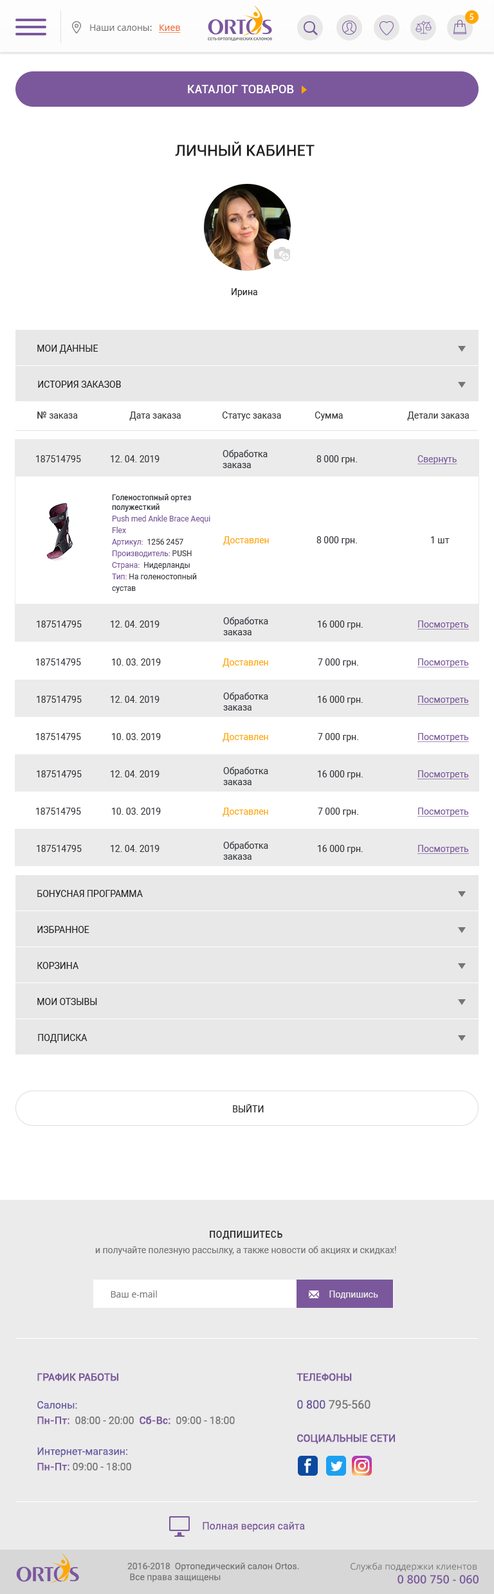
<style>
.page{position:relative;width:494px;height:1594px;background:#ffffff}
.page>*{position:absolute;margin:0}
.t1{font:9px "MyriadPro-Regular";letter-spacing:0.1em;color:#ffffff;text-transform:uppercase}
.t2{font:9px "OpenSans";color:#757575}
.t3{font:9px "OpenSans";color:#f26022;text-decoration:underline}
.t4{font:11.6px "Roboto-Medium";letter-spacing:0.01em;color:#ffffff;text-transform:uppercase}
.t5{font:15.4px "Roboto-Medium";color:#212121;text-transform:uppercase}
.t6{font:9px "Roboto-Regular";color:#212121}
.t7{font:9px "Roboto-Regular";color:#212121;text-transform:uppercase}
.t8{font:9px "Roboto-Regular";color:#34373d}
.t9{font:9px "Roboto-Medium";color:#34373d}
.t10{font:9px "Roboto-Regular";color:#7b589c;text-decoration:underline}
.t11{font:7.7px/11.6px "Roboto-Regular";color:#7b589c}
.t12{font:7.7px "Roboto-Medium";color:#34373d}
.t13{font:7.7px/11.6px "Roboto-Regular";color:#34373d}
.t14{font:9px "Roboto-Regular";color:#ffa700}
.t15{font:9px/15.4px "Roboto-Regular";color:#757575}
.t16{font:9px "Roboto-Medium";letter-spacing:0.05em;color:#212121;text-transform:uppercase}
.t17{font:9px "Roboto-Regular";color:#ebebeb}
.t18{font:10.3px/15.4px "Roboto-Regular";color:#6758a2}
.t19{font:10.3px "Roboto-Medium";color:#7b589c;text-transform:uppercase}
.t20{font:10.3px/15.4px "Roboto-Medium";color:#7b589c}
.t21{font:10.3px/15.4px "Roboto-Regular";color:#757575}
.t22{font:11.6px/15.4px "Roboto-Regular";color:#68579a}
.t23{font:11.6px/15.4px "Roboto-Regular";color:#757575}
.t24{font:10.3px "Roboto-Regular";color:#7b589c}
.t25{font:9px "Roboto-Regular";color:#757575}
.t26{font:11.6px "OpenSans-Semibold";color:#7b589c}
</style>
<div class="page">
<p class="t1" style="left:469px;top:14px;width:4px;height:6px">5</p>
<p class="t2" style="left:90px;top:24px;width:91px;height:9px">Наши салоны: <span class="t3">Киев</span></p>
<p class="t4" style="left:188px;top:85px;width:106px;height:8px">Каталог товаров</p>
<p class="t5" style="left:175px;top:141px;width:139px;height:15px">Личный кабинет</p>
<p class="t6" style="left:231px;top:288px;width:26px;height:9px">Ирина</p>
<p class="t7" style="left:37px;top:345px;width:61px;height:9px">Мои данные</p>
<p class="t7" style="left:38px;top:381px;width:83px;height:7px">История заказов</p>
<p class="t8" style="left:37px;top:411px;width:432px;height:9px"><span class="t9">№</span> заказа    Дата заказа   Статус заказа  Сумма    Детали заказа</p>
<p class="t8" style="left:222px;top:449px;width:45px;height:19px">Обработка<br>заказа</p>
<p class="t8" style="left:36px;top:455px;width:45px;height:7px">187514795</p>
<p class="t8" style="left:111px;top:455px;width:48px;height:7px">12. 04. 2019</p>
<p class="t8" style="left:316px;top:455px;width:41px;height:9px">8 000 грн.</p>
<p class="t10" style="left:417px;top:455px;width:40px;height:9px">Свернуть</p>
<p class="t11" style="left:112px;top:494px;width:98px;height:99px"><span class="t12">Голеностопный ортез полужесткий<br></span>Push med Ankle Brace Aequi Flex <br>Артикул:<span class="t13">  1256 2457<br></span>Производитель: <span class="t13">PUSH<br></span>Страна:  <span class="t13">Нидерланды<br></span>Тип: <span class="t13">На голеностопный сустав</span></p>
<p class="t14" style="left:223px;top:536px;width:46px;height:9px">Доставлен</p>
<p class="t8" style="left:316px;top:536px;width:41px;height:9px">8 000 грн.</p>
<p class="t8" style="left:431px;top:536px;width:18px;height:7px">1 шт</p>
<p class="t8" style="left:223px;top:616px;width:45px;height:19px">Обработка <br>заказа</p>
<p class="t8" style="left:37px;top:620px;width:45px;height:7px">187514795</p>
<p class="t8" style="left:111px;top:620px;width:48px;height:7px">12. 04. 2019</p>
<p class="t8" style="left:318px;top:620px;width:45px;height:9px">16 000 грн.</p>
<p class="t10" style="left:417px;top:620px;width:52px;height:9px">Посмотреть</p>
<p class="t8" style="left:36px;top:658px;width:45px;height:7px">187514795</p>
<p class="t8" style="left:112px;top:658px;width:49px;height:7px">10. 03. 2019</p>
<p class="t14" style="left:222px;top:658px;width:46px;height:9px">Доставлен</p>
<p class="t8" style="left:318px;top:658px;width:40px;height:9px">7 000 грн.</p>
<p class="t10" style="left:417px;top:658px;width:52px;height:9px">Посмотреть</p>
<p class="t8" style="left:37px;top:696px;width:45px;height:7px">187514795</p>
<p class="t8" style="left:111px;top:696px;width:48px;height:7px">12. 04. 2019</p>
<p class="t8" style="left:223px;top:692px;width:45px;height:18px">Обработка <br>заказа</p>
<p class="t8" style="left:318px;top:696px;width:45px;height:9px">16 000 грн.</p>
<p class="t10" style="left:417px;top:696px;width:52px;height:9px">Посмотреть</p>
<p class="t8" style="left:36px;top:733px;width:45px;height:7px">187514795</p>
<p class="t8" style="left:112px;top:733px;width:49px;height:7px">10. 03. 2019</p>
<p class="t14" style="left:222px;top:733px;width:46px;height:9px">Доставлен</p>
<p class="t8" style="left:318px;top:733px;width:40px;height:9px">7 000 грн.</p>
<p class="t10" style="left:417px;top:733px;width:52px;height:9px">Посмотреть</p>
<p class="t8" style="left:37px;top:770px;width:45px;height:7px">187514795</p>
<p class="t8" style="left:111px;top:770px;width:48px;height:7px">12. 04. 2019</p>
<p class="t8" style="left:223px;top:766px;width:45px;height:19px">Обработка <br>заказа</p>
<p class="t8" style="left:318px;top:770px;width:45px;height:9px">16 000 грн.</p>
<p class="t10" style="left:417px;top:770px;width:52px;height:9px">Посмотреть</p>
<p class="t8" style="left:36px;top:807px;width:45px;height:8px">187514795</p>
<p class="t8" style="left:112px;top:807px;width:49px;height:8px">10. 03. 2019</p>
<p class="t14" style="left:222px;top:807px;width:46px;height:9px">Доставлен</p>
<p class="t8" style="left:318px;top:807px;width:40px;height:9px">7 000 грн.</p>
<p class="t10" style="left:417px;top:807px;width:52px;height:9px">Посмотреть</p>
<p class="t8" style="left:37px;top:845px;width:45px;height:7px">187514795</p>
<p class="t8" style="left:111px;top:845px;width:48px;height:7px">12. 04. 2019</p>
<p class="t8" style="left:223px;top:841px;width:45px;height:19px">Обработка <br>заказа</p>
<p class="t8" style="left:318px;top:845px;width:45px;height:9px">16 000 грн.</p>
<p class="t10" style="left:417px;top:845px;width:52px;height:9px">Посмотреть</p>
<p class="t7" style="left:37px;top:890px;width:106px;height:7px">Бонусная программа</p>
<p class="t7" style="left:37px;top:926px;width:52px;height:7px">Избранное</p>
<p class="t7" style="left:37px;top:962px;width:42px;height:7px">Корзина</p>
<p class="t7" style="left:37px;top:998px;width:60px;height:7px">Мои отзывы</p>
<p class="t7" style="left:38px;top:1034px;width:49px;height:9px">Подписка</p>
<p class="t7" style="left:233px;top:1104px;width:31px;height:8px">Выйти</p>
<p class="t15" style="left:95px;top:1230px;width:301px;height:25px;text-align:center"><span class="t16">Подпишитесь <br></span>и получайте полезную рассылку, а также новости об акциях и скидках!</p>
<p class="t2" style="left:111px;top:1290px;width:46px;height:7px">Ваш e-mail</p>
<p class="t17" style="left:329px;top:1290px;width:49px;height:9px">Подпишись</p>
<p class="t18" style="left:37px;top:1372px;width:198px;height:98px"><span class="t19">График работы<br><br></span>Салоны: <br><span class="t20">Пн-Пт:</span><span class="t21">  08:00 - 20:00  </span><span class="t20">Сб-Вс:</span><span class="t21">  09:00 - 18:00<br><br></span>Интернет-магазин:<br><span class="t20">Пн-Пт:</span><span class="t21"> 09:00 - 18:00</span></p>
<p class="t19" style="left:296px;top:1372px;width:74px;height:36px">Телефоны<br><br><span class="t22">0 800 </span><span class="t23">795-560</span></p>
<p class="t19" style="left:297px;top:1434px;width:98px;height:10px">Социальные сети</p>
<p class="t24" style="left:203px;top:1521px;width:102px;height:10px">Полная версия сайта</p>
<p class="t25" style="left:127px;top:1562px;width:172px;height:20px">2016-2018  Ортопедический салон Ortos.<br> Все права защищены</p>
<p class="t2" style="left:350px;top:1562px;width:128px;height:21px;text-align:right">Служба поддержки клиентов <br> <span class="t26">0 800 750 - 060</span></p>
</div>
